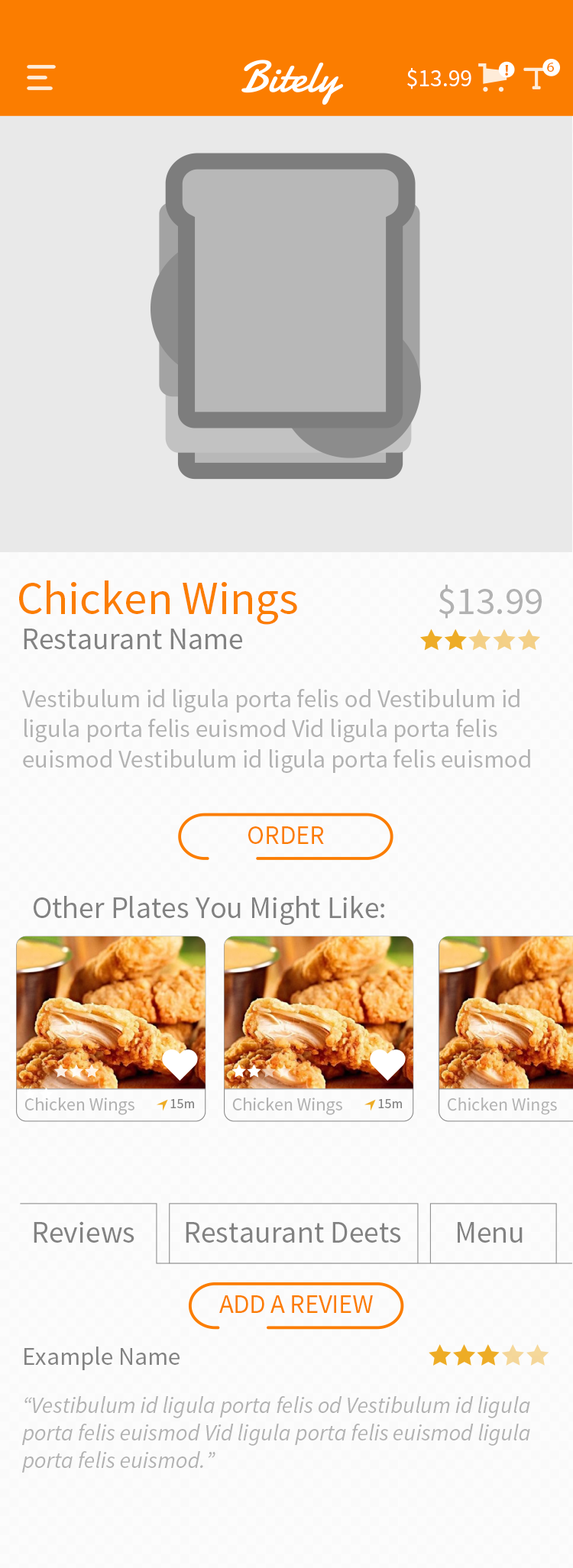
<style>
.page{position:relative;width:573px;height:1568px;background:#fcfcfc}
.page>*{position:absolute;margin:0}
.t1{font:15.7px "MyriadPro-Bold";color:#fb7d00}
.t2{font:14.2px "MyriadPro-Regular";color:#fb7d00}
.t3{font:24.2px "SourceSansPro-Regular";color:#ffffff}
.t4{font:46.6px "SourceSansPro-Regular";color:#fb7d00}
.t5{font:39.1px "SourceSansPro-Regular";color:#b2b2b2}
.t6{font:30.4px "SourceSansPro-Regular";color:#828282}
.t7{font:25.1px "SourceSansPro-Regular";color:#b2b2b2}
.t8{font:25.1px "SourceSansPro-Regular";letter-spacing:-0.014em;color:#b2b2b2}
.t9{font:25.1px "SourceSansPro-Regular";letter-spacing:-0.017em;color:#b2b2b2}
.t10{font:25.1px "SourceSansPro-Regular";letter-spacing:-0.009em;color:#b2b2b2}
.t11{font:26.7px "SourceSansPro-Regular";letter-spacing:-0.011em;color:#fb7d00}
.t12{font:18.3px "SourceSansPro-Regular";color:#b2b2b2}
.t13{font:13.9px "SourceSansPro-Regular";color:#828282}
.t14{font:25.2px "SourceSansPro-Regular";color:#828282}
.t15{font:22.9px "SourceSansPro-It";color:#b2b2b2}
.t16{font:22.9px "SourceSansPro-It";letter-spacing:-0.014em;color:#b2b2b2}
.t17{font:22.9px "SourceSansPro-It";letter-spacing:-0.017em;color:#b2b2b2}
.t18{font:22.9px "SourceSansPro-It";letter-spacing:-0.009em;color:#b2b2b2}
</style>
<div class="page">
<p class="t1" style="left:505px;top:65px;width:3px;height:11px">!</p>
<p class="t2" style="left:547px;top:63px;width:7px;height:9px">6</p>
<p class="t3" style="left:407px;top:68px;width:64px;height:21px">$13.99</p>
<p class="t4" style="left:19px;top:580px;width:278px;height:45px">Chicken Wings</p>
<p class="t5" style="left:438px;top:584px;width:104px;height:35px">$13.99</p>
<p class="t6" style="left:24px;top:629px;width:218px;height:20px">Restaurant Name</p>
<p class="t7" style="left:22px;top:689px;width:508px;height:84px"><span class="t8">V</span>estibulum id ligula por<span class="t9">t</span>a <span class="t10">f</span>elis od <span class="t8">V</span>estibulum id ligula por<span class="t9">t</span>a <span class="t10">f</span>elis euismod <span class="t8">V</span>id ligula por<span class="t9">t</span>a <span class="t10">f</span>elis euismod <span class="t8">V</span>estibulum id ligula por<span class="t9">t</span>a <span class="t10">f</span>elis euismod</p>
<p class="t11" style="left:248px;top:826px;width:76px;height:18px">ORDER</p>
<p class="t6" style="left:34px;top:896px;width:350px;height:29px">Other Plates You Might Like:</p>
<p class="t12" style="left:24px;top:1098px;width:110px;height:17px">Chicken Wings</p>
<p class="t12" style="left:232px;top:1098px;width:110px;height:17px">Chicken Wings</p>
<p class="t13" style="left:170px;top:1099px;width:24px;height:9px">15m</p>
<p class="t13" style="left:378px;top:1099px;width:24px;height:9px">15m</p>
<p class="t6" style="left:34px;top:1221px;width:100px;height:22px">Reviews</p>
<p class="t6" style="left:186px;top:1222px;width:215px;height:21px">Restaurant Deets</p>
<p class="t6" style="left:457px;top:1222px;width:65px;height:21px">Menu</p>
<p class="t11" style="left:219px;top:1295px;width:154px;height:18px">ADD A REVIEW</p>
<p class="t14" style="left:24px;top:1347px;width:155px;height:23px">Example Name</p>
<p class="t15" style="left:22px;top:1396px;width:508px;height:77px"><span class="t16">“V</span>estibulum id ligula por<span class="t17">t</span>a <span class="t18">f</span>elis od <span class="t16">V</span>estibulum id ligula por<span class="t17">t</span>a <span class="t18">f</span>elis euismod <span class="t16">V</span>id ligula por<span class="t17">t</span>a <span class="t18">f</span>elis euismod ligula por<span class="t17">t</span>a <span class="t18">f</span>elis euismod.”</p>
</div>
